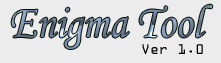
<style>
.page{position:relative;width:221px;height:63px;background:#ececec}
.page>*{position:absolute;margin:0}
.t1{font:46.9px "MonotypeCorsiva";scale:0.91 1}
.t2{font:15px "OCRAExtended";color:#000000}
</style>
<div class="page">
<p class="t1" style="left:11px;top:4px;width:202px;height:45px">Enigma Tool</p>
<p class="t2" style="left:142px;top:44px;width:61px;height:10px">Ver 1.0</p>
</div>
